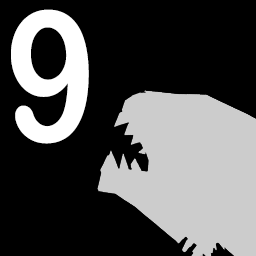
<style>
.page{position:relative;width:256px;height:256px;background:#000000}
.page>*{position:absolute;margin:0}
.t1{font:182.4px "ArialRoundedMTBold";letter-spacing:-0.4em;color:#ffffff;font-variant:small-caps;scale:0.83 1}
</style>
<div class="page">
<p class="t1" style="left:11px;top:9px;width:78px;height:135px">9</p>
</div>
